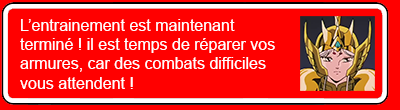
<style>
.page{position:relative;width:400px;height:110px;background:#ff0000}
.page>*{position:absolute;margin:0}
.t1{font:16px "ArialMT";color:#ffffff}
</style>
<div class="page">
<p class="t1" style="left:20px;top:19px;width:255px;height:70px">L’entrainement est maintenant<br>terminé ! il est temps de réparer vos<br>armures, car des combats difficiles<br>vous attendent !</p>
</div>
